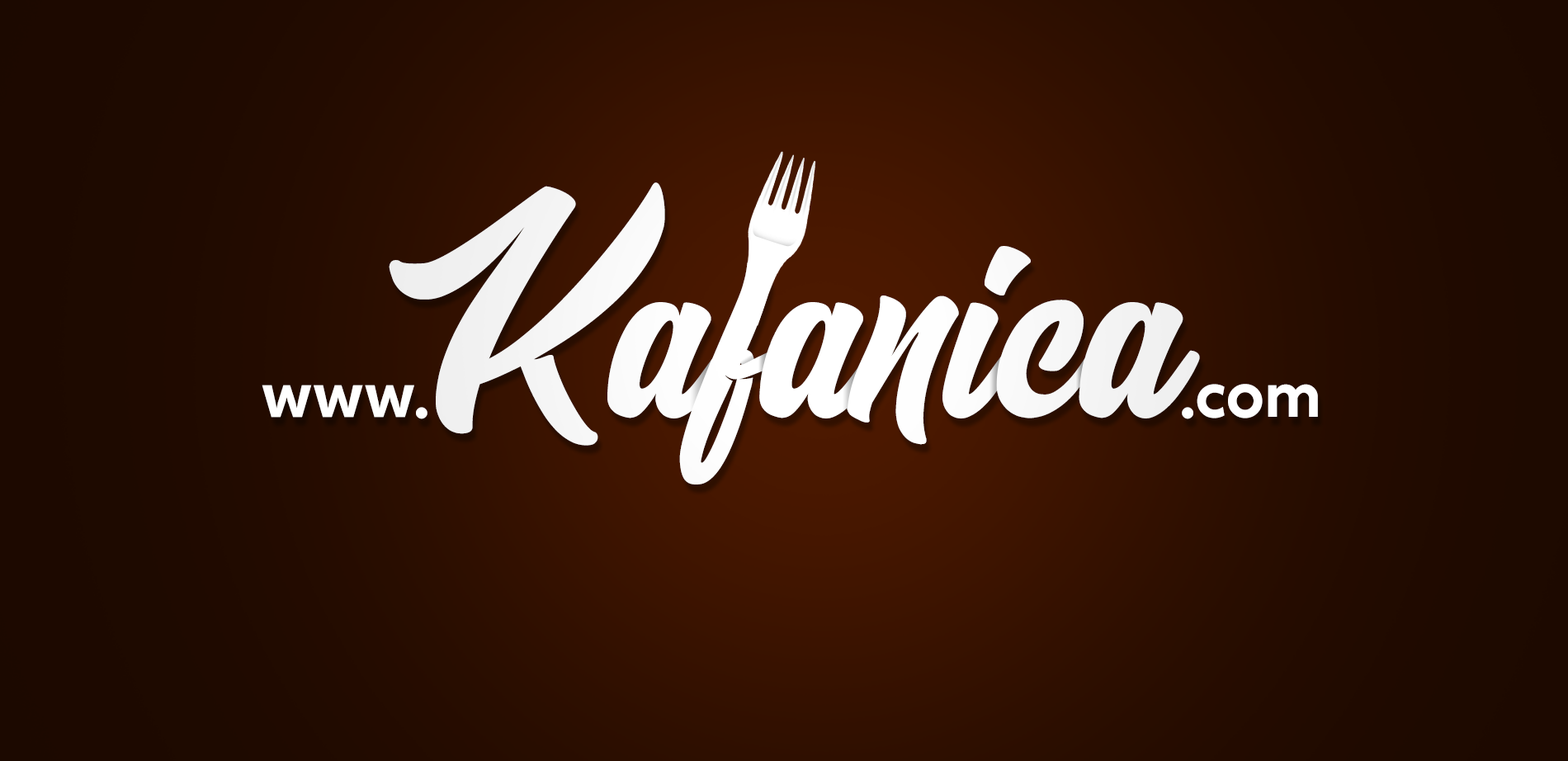
<style>
.page{position:relative;width:1568px;height:761px}
.page>*{position:absolute;margin:0}
.t1{font:210.6px "MasterofComicsPersonalUse";color:#ededed}
.t2{font:62.8px "XXIIGeom-Bold";color:#ffffff}
</style>
<div class="page">
<p class="t1" style="left:389px;top:182px;width:811px;height:302px">Kafanica</p>
<p class="t2" style="left:262px;top:384px;width:165px;height:35px">www.</p>
<p class="t2" style="left:1181px;top:384px;width:137px;height:35px">.com</p>
</div>
